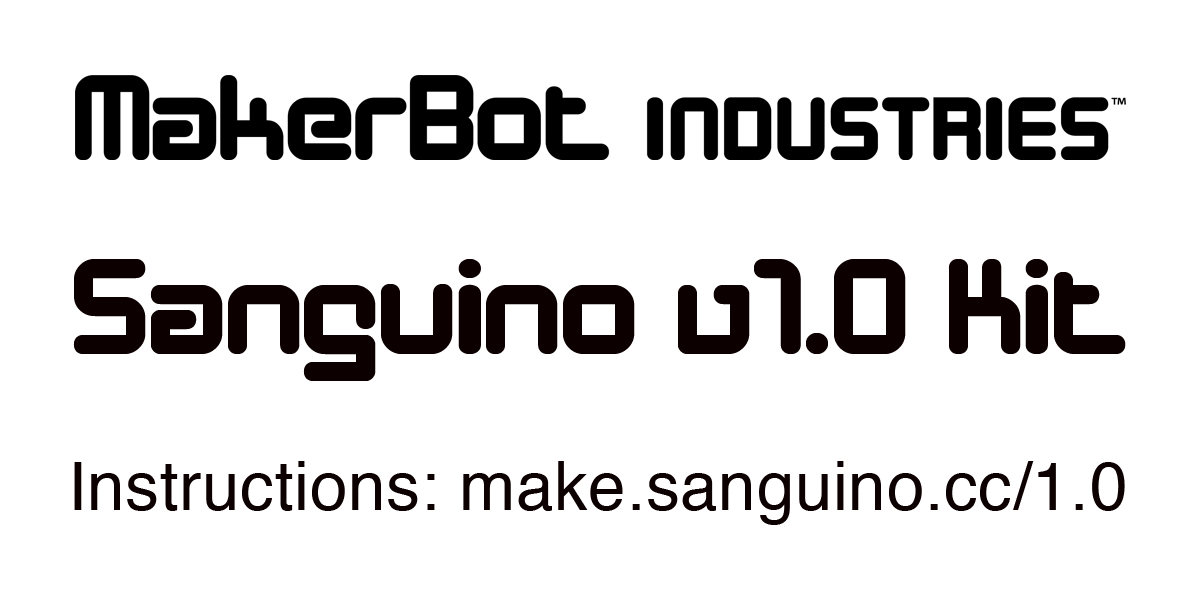
<style>
.page{position:relative;width:1200px;height:600px;background:#ffffff}
.page>*{position:absolute;margin:0}
.t1{font:138.2px "DesignerBlock";letter-spacing:0.01em;color:#0c0000}
.t2{font:67.4px "Helvetica";letter-spacing:0.01em;color:#0c0000}
</style>
<div class="page">
<p class="t1" style="left:73px;top:259px;width:1053px;height:122px">Sanguino v1.0 Kit</p>
<p class="t2" style="left:74px;top:461px;width:1051px;height:64px">Instructions: make.sanguino.cc/1.0</p>
</div>
